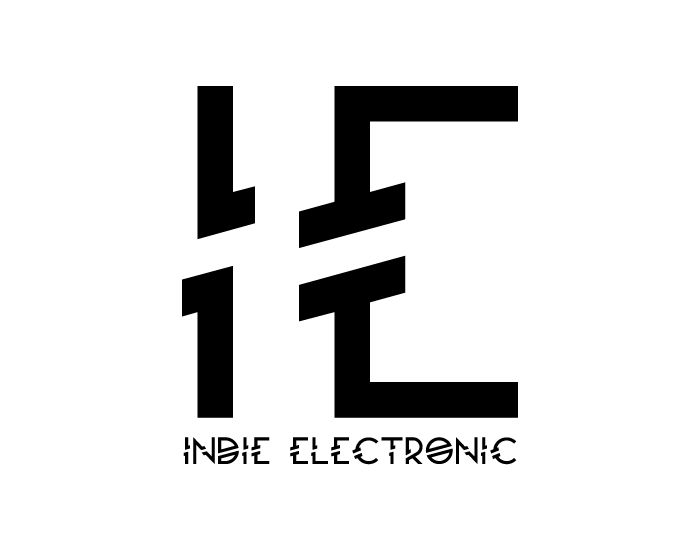
<style>
.page{position:relative;width:700px;height:541px;background:#ffffff}
.page>*{position:absolute;margin:0}
.t1{font:442px "Moondance";color:#000000}
.t2{font:35.4px "Moondance";color:#000000}
</style>
<div class="page">
<p class="t1" style="left:182px;top:86px;width:336px;height:332px">IE</p>
<p class="t2" style="left:183px;top:437px;width:334px;height:28px">INDIE ELECTRONIC</p>
</div>
